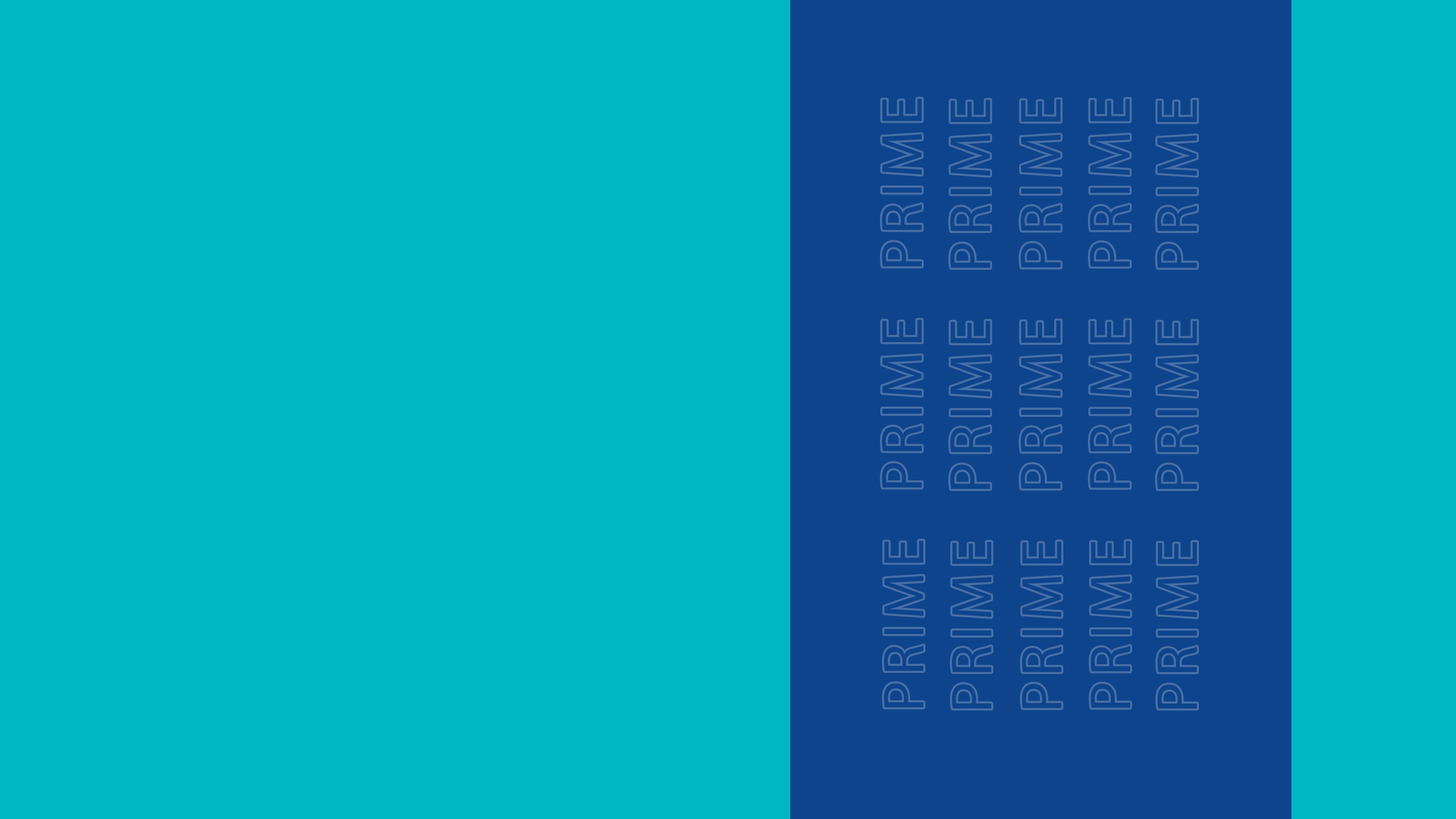
<style>
.page{position:relative;width:1456px;height:819px;background:#00b7c2}
.page>*{position:absolute;margin:0}
.t1{font:58.4px "MyriadPro-Regular";letter-spacing:0.075em;color:#0e448c;text-transform:uppercase}
.t2{font:58px "MyriadPro-Regular";letter-spacing:0.075em;color:#0e448c;text-transform:uppercase}
</style>
<div class="page">
<p class="t1" style="left:882px;top:99px;width:40px;height:168px;rotate:-90deg">PRIME</p>
<p class="t1" style="left:950px;top:100px;width:41px;height:168px;rotate:-90deg">PRIME</p>
<p class="t1" style="left:1021px;top:99px;width:40px;height:168px;rotate:-90deg">PRIME</p>
<p class="t1" style="left:1090px;top:99px;width:40px;height:168px;rotate:-90deg">PRIME</p>
<p class="t1" style="left:1157px;top:100px;width:40px;height:168px;rotate:-90deg">PRIME</p>
<p class="t1" style="left:882px;top:320px;width:40px;height:168px;rotate:-90deg">PRIME</p>
<p class="t1" style="left:950px;top:321px;width:41px;height:168px;rotate:-90deg">PRIME</p>
<p class="t1" style="left:1021px;top:320px;width:40px;height:168px;rotate:-90deg">PRIME</p>
<p class="t1" style="left:1090px;top:320px;width:40px;height:168px;rotate:-90deg">PRIME</p>
<p class="t1" style="left:1157px;top:321px;width:40px;height:168px;rotate:-90deg">PRIME</p>
<p class="t2" style="left:884px;top:540px;width:39px;height:168px;rotate:-90deg">PRIME</p>
<p class="t2" style="left:952px;top:542px;width:39px;height:166px;rotate:-90deg">PRIME</p>
<p class="t2" style="left:1022px;top:541px;width:39px;height:167px;rotate:-90deg">PRIME</p>
<p class="t2" style="left:1091px;top:541px;width:39px;height:167px;rotate:-90deg">PRIME</p>
<p class="t2" style="left:1158px;top:542px;width:39px;height:167px;rotate:-90deg">PRIME</p>
</div>
